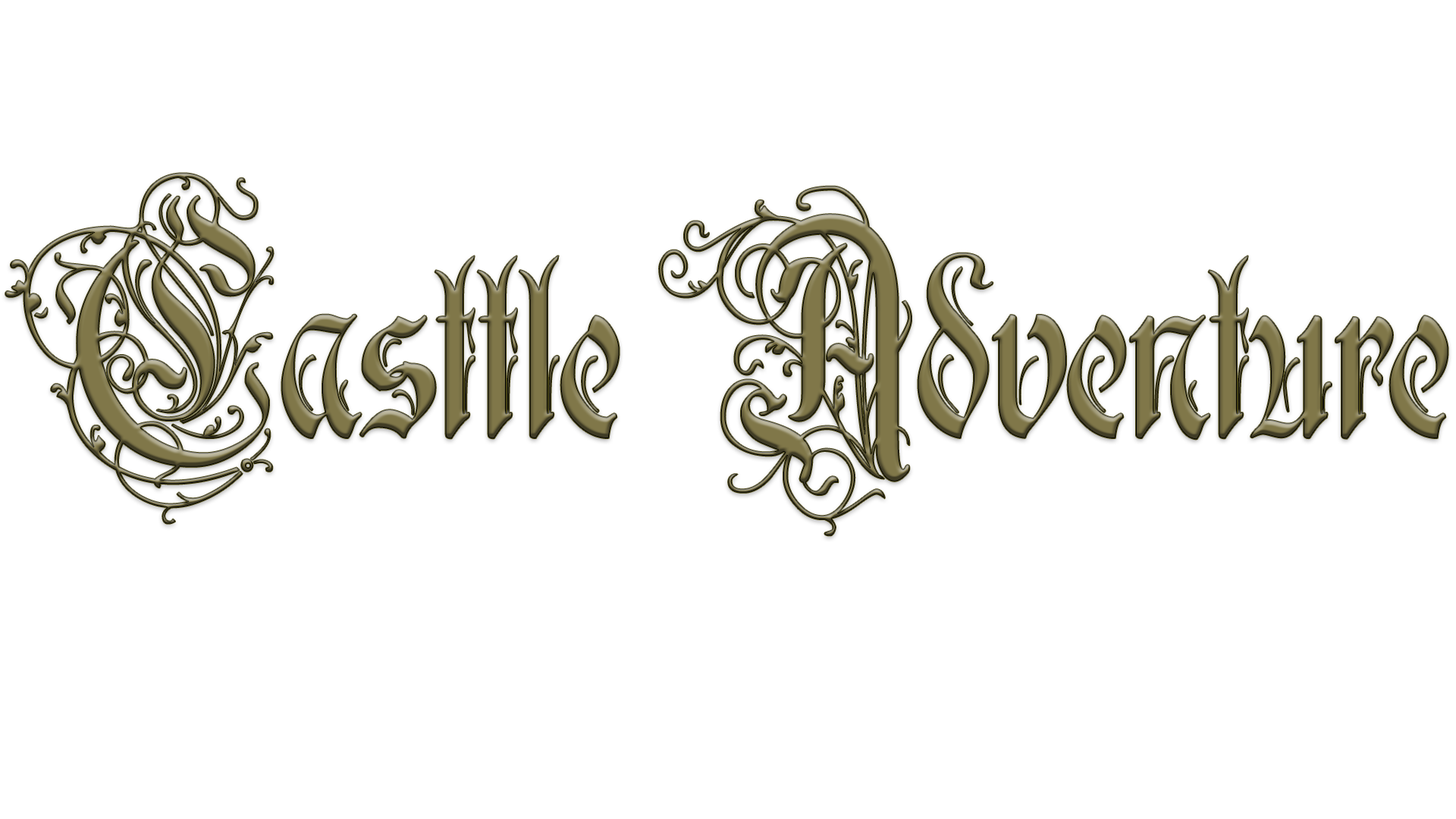
<style>
.page{position:relative;width:1456px;height:819px;background:#ffffff}
.page>*{position:absolute;margin:0}
.t1{font:221px "RothenburgDecorative";scale:0.89 1}
</style>
<div class="page">
<p class="t1" style="left:5px;top:173px;width:1443px;height:363px">Casttle Adventure</p>
</div>
